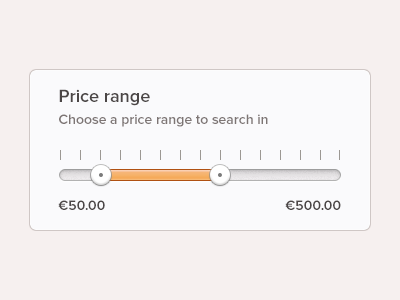
<style>
.page{position:relative;width:400px;height:300px;background:#f6f0ef}
.page>*{position:absolute;margin:0}
.t1{font:18px "ProximaNova-Semibold";color:#4b4646}
.t2{font:14px "ProximaNova-Semibold";color:#7d7574}
.t3{font:14px "ProximaNova-Semibold";color:#4b4646}
.t4{font:14px "ProximaNova-Semibold";color:#4c4747}
</style>
<div class="page">
<p class="t1" style="left:59px;top:89px;width:91px;height:17px">Price range</p>
<p class="t2" style="left:59px;top:114px;width:209px;height:13px">Choose a price range to search in</p>
<p class="t3" style="left:58px;top:200px;width:47px;height:10px">€50.00</p>
<p class="t4" style="left:285px;top:200px;width:56px;height:10px">€500.00</p>
</div>
